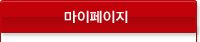
<style>
.page{position:relative;width:200px;height:42px;background:#c1020a}
.page>*{position:absolute;margin:0}
.t1{font:14px "YDIYGO340";color:#ffffff}
</style>
<div class="page">
<p class="t1" style="left:64px;top:10px;width:64px;height:13px">마이페이지</p>
</div>
